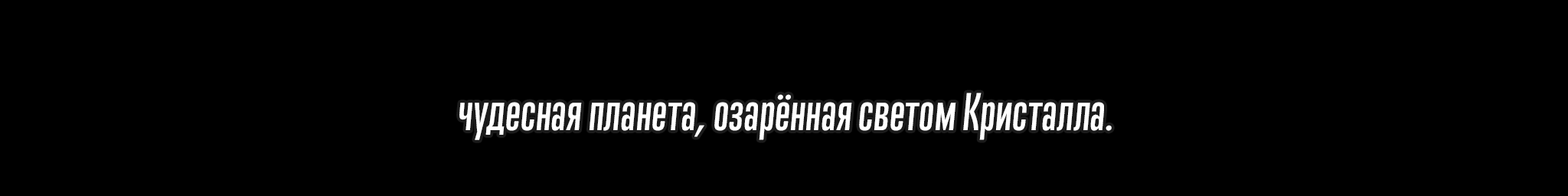
<style>
.page{position:relative;width:1568px;height:196px;background:#000000}
.page>*{position:absolute;margin:0}
.t1{font:48.6px "TrumpGothicPro-MediumIt";letter-spacing:0.005em;color:#ffffff;scale:1.07 1}
</style>
<div class="page">
<p class="t1" style="left:459px;top:93px;width:653px;height:47px">чудесная планета, озарённая светом Кристалла.</p>
</div>
